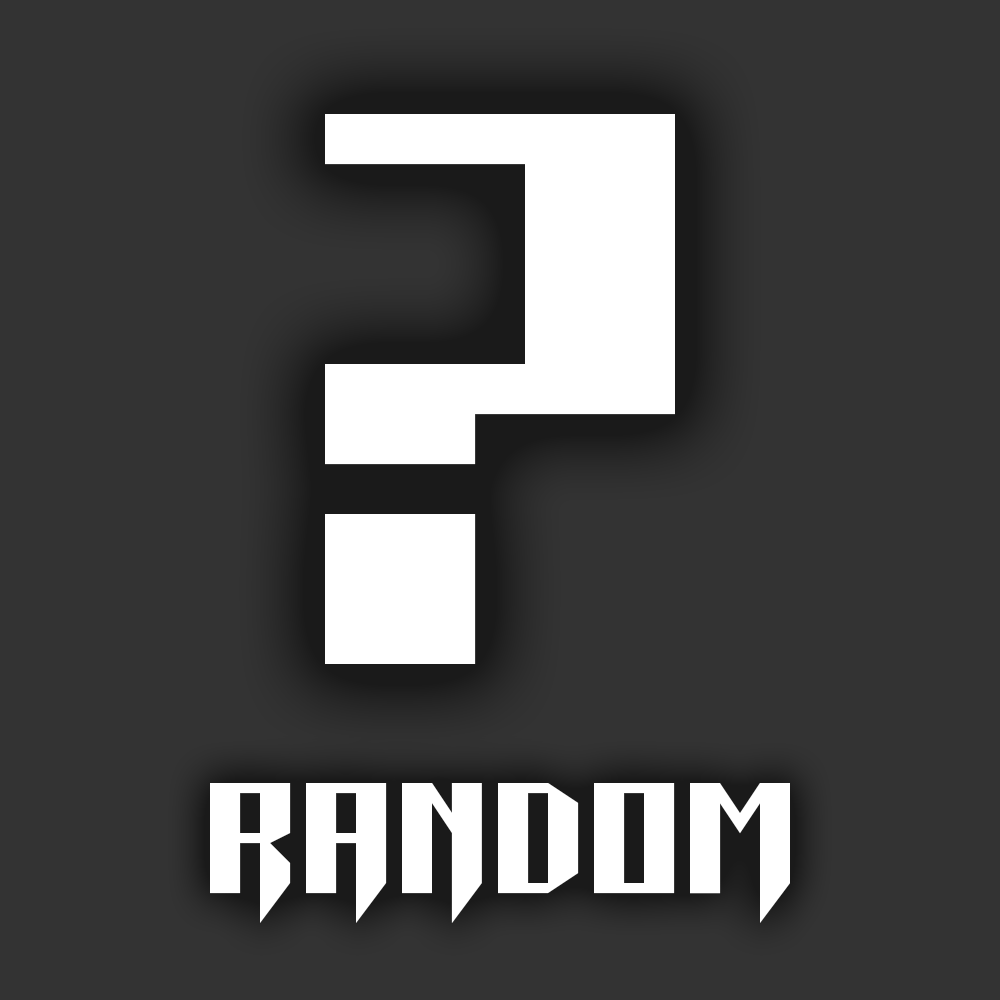
<style>
.page{position:relative;width:1000px;height:1000px;background:#333333}
.page>*{position:absolute;margin:0}
.t1{font:1000px "RETURNTOCASTLE";letter-spacing:-0.02em;color:#ffffff}
.t2{font:200px "RETURNTOCASTLE";letter-spacing:-0.02em;color:#ffffff}
</style>
<div class="page">
<p class="t1" style="left:325px;top:114px;width:350px;height:550px">?</p>
<p class="t2" style="left:210px;top:783px;width:580px;height:140px">RANDOM</p>
</div>
